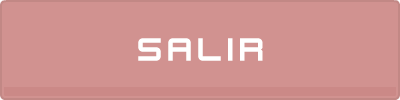
<style>
.page{position:relative;width:400px;height:100px;background:#d19290}
.page>*{position:absolute;margin:0}
.t1{font:36px "KenVector-Future";color:#ffffff}
</style>
<div class="page">
<p class="t1" style="left:138px;top:38px;width:125px;height:23px">salir</p>
</div>
